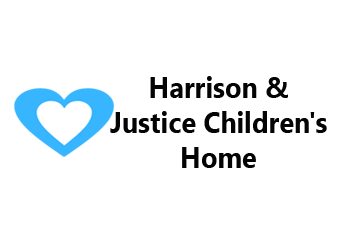
<style>
.page{position:relative;width:340px;height:227px;background:#ffffff}
.page>*{position:absolute;margin:0}
.t1{font:29px "LeelawadeeUI-Bold";color:#040404;scale:0.93 1}
</style>
<div class="page">
<p class="t1" style="left:110px;top:76px;width:217px;height:92px;text-align:center">Harrison &amp;<br>Justice Children's<br>Home</p>
</div>
